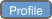
<style>
.page{position:relative;width:52px;height:19px;background:#6699cc}
.page>*{position:absolute;margin:0}
.t1{font:12px "HelveticaNeue";color:#ffffff}
</style>
<div class="page">
<p class="t1" style="left:10px;top:6px;width:33px;height:9px">Profile</p>
</div>
